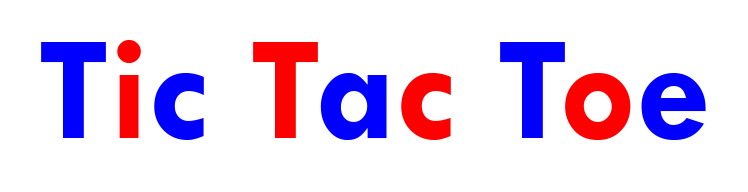
<style>
.page{position:relative;width:748px;height:192px;background:#ffffff}
.page>*{position:absolute;margin:0}
.t1{font:150px "TwCenMT-Bold";color:#0000ff}
.t2{font:150px "TwCenMT-Bold";color:#ff0000}
</style>
<div class="page">
<p class="t1" style="left:41px;top:40px;width:665px;height:100px">T<span class="t2">i</span>c <span class="t2">T</span>a<span class="t2">c</span> T<span class="t2">o</span>e</p>
</div>
